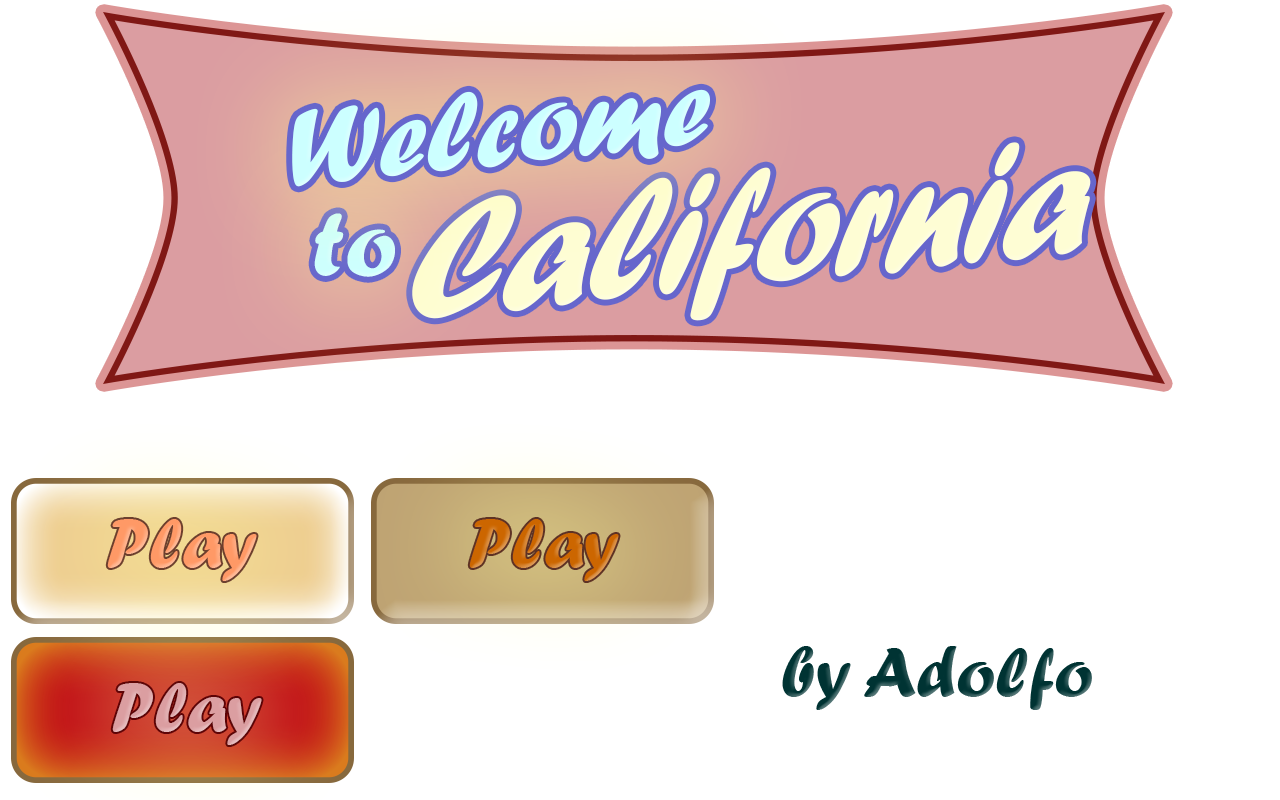
<style>
.page{position:relative;width:1280px;height:800px;background:#ffffff}
.page>*{position:absolute;margin:0}
.t1{font:114.3px "ForteMT";color:#ccffff}
.t2{font:180.3px "ForteMT";color:#fefdd4;scale:0.86 1}
.t3{font:95.8px "ForteMT";color:#ccffff}
.t4{font:72px "ForteMT";color:#ff9966}
.t5{font:72px "ForteMT";color:#cc6600}
.t6{font:72px "ForteMT";color:#003333}
.t7{font:72px "ForteMT";color:#db9ea1}
</style>
<div class="page">
<p class="t1" style="left:292px;top:89px;width:418px;height:98px;rotate:-6deg">Welcome</p>
<p class="t2" style="left:412px;top:142px;width:679px;height:179px;rotate:-6deg">California</p>
<p class="t3" style="left:314px;top:213px;width:81px;height:64px;rotate:-1deg">to</p>
<p class="t4" style="left:107px;top:519px;width:150px;height:62px">Play</p>
<p class="t5" style="left:469px;top:519px;width:150px;height:62px">Play</p>
<p class="t6" style="left:782px;top:646px;width:310px;height:64px">by Adolfo</p>
<p class="t7" style="left:112px;top:683px;width:150px;height:62px">Play</p>
</div>
